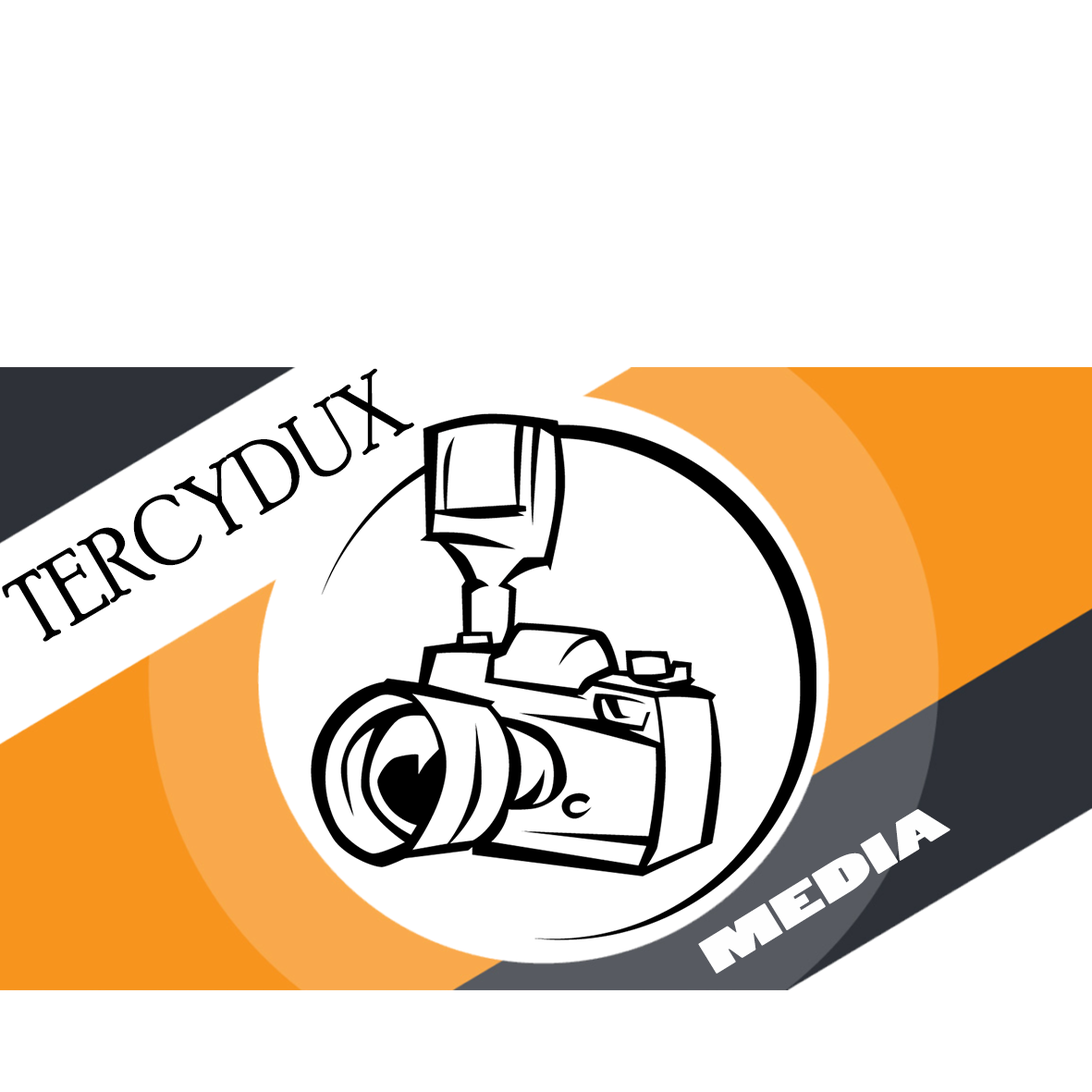
<style>
.page{position:relative;width:1092px;height:1092px;background:#ffffff}
.page>*{position:absolute;margin:0}
.t1{font:23.4px "PoorRichard-Regular";color:#000000;scale:0.93 1}
.t2{font:23.4px "CooperBlack";color:#000000;scale:0.93 1}
.t3{font:11.1px "PoplarStd";color:#fefefe;scale:2.59 1}
</style>
<div class="page">
<p class="t1" style="left:2px;top:368px;width:412px;height:274px;rotate:-30deg"><span class="t2">       </span>               TERCYDUX</p>
<p class="t3" style="left:698px;top:809px;width:253px;height:165px;rotate:-32deg">MEDIA</p>
</div>
